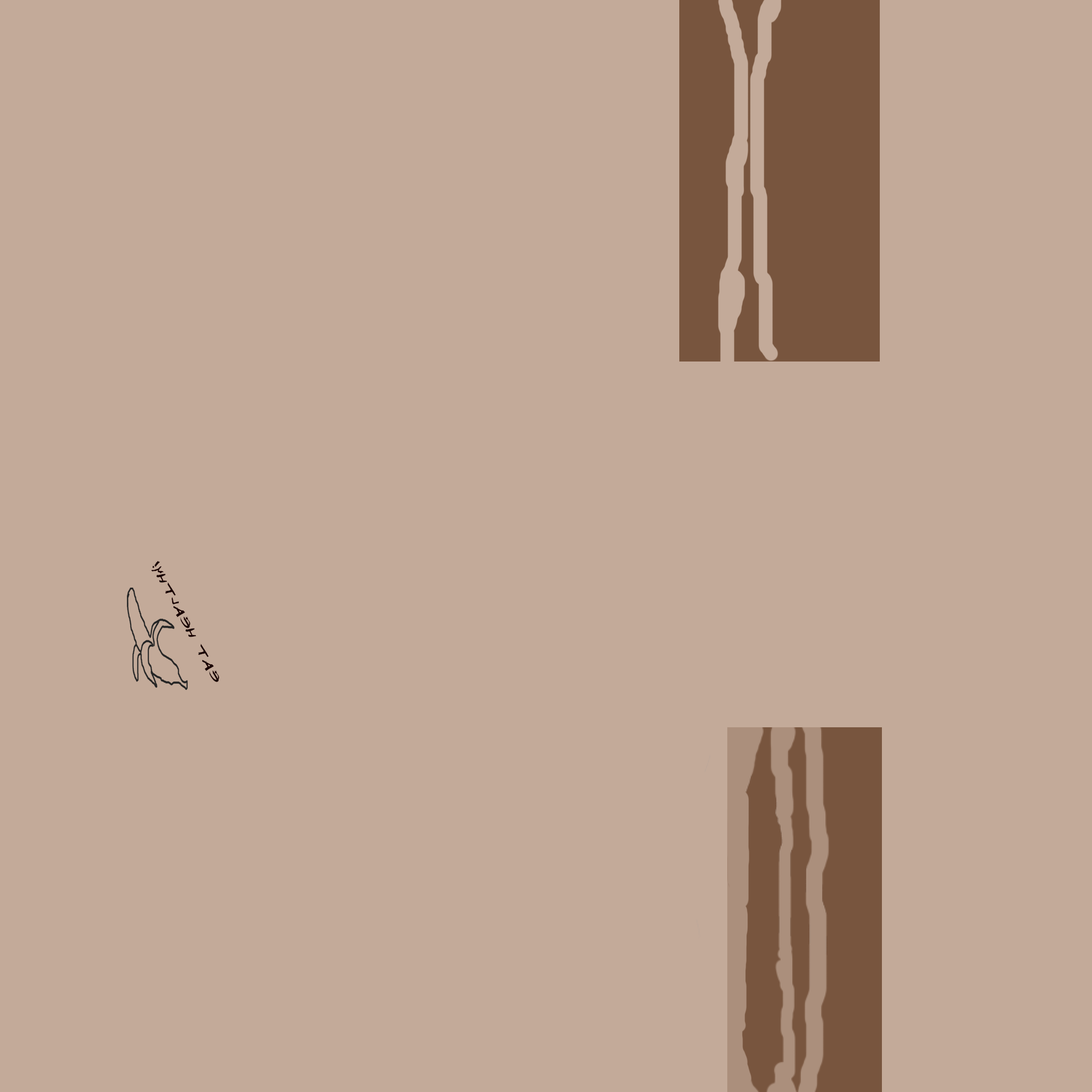
<style>
.page{position:relative;width:1092px;height:1092px;background:#c3aa99}
.page>*{position:absolute;margin:0}
.t1{font:11.2px "DJ-Gross";color:#190000;scale:1.46 1}
</style>
<div class="page">
<p class="t1" style="left:151px;top:561px;width:68px;height:121px;rotate:-118deg">eat healthy!</p>
</div>
